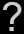
<style>
.page{position:relative;width:24px;height:34px;background:#000000}
.page>*{position:absolute;margin:0}
.t1{font:40px "ArialMT";color:#cccccc}
</style>
<div class="page">
<p class="t1" style="left:3px;top:2px;width:19px;height:29px">?</p>
</div>
